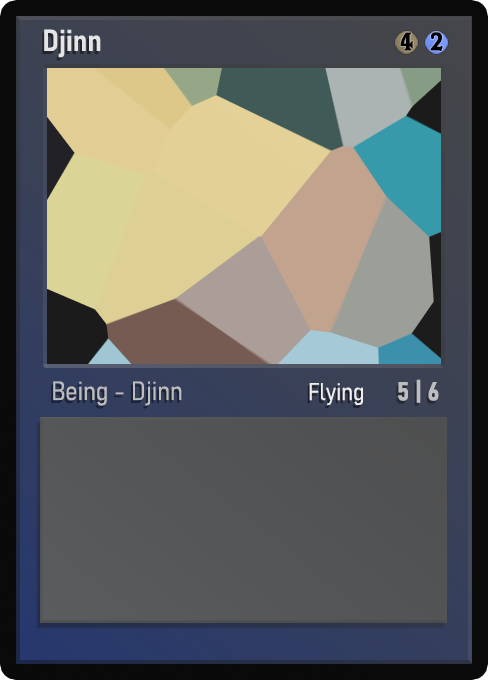
<style>
.page{position:relative;width:488px;height:680px}
.page>*{position:absolute;margin:0}
.t1{font:30px "Bahnschrift-SemiBoldSemiCondensed";color:#f2f2f2;font-weight:bold}
.t2{font:25px "WTRRoycroft";color:#000000;font-weight:bold;scale:1.09 1}
.t3{font:26px "Bahnschrift-LightSemiCondensed";color:#c8c8c8;font-weight:bold}
.t4{font:24px "Bahnschrift-LightSemiCondensed";color:#f0efef;font-weight:bold}
.t5{font:26px "Bahnschrift-BoldSemiCondensed";color:#bcbdc0;font-weight:bold}
</style>
<div class="page">
<p class="t1" style="left:44px;top:29px;width:57px;height:29px;opacity:0.9">Djinn</p>
<p class="t2" style="left:400px;top:32px;width:13px;height:19px">4</p>
<p class="t2" style="left:430px;top:32px;width:13px;height:19px">2</p>
<p class="t3" style="left:53px;top:381px;width:129px;height:25px;opacity:0.9">Being - Djinn</p>
<p class="t4" style="left:309px;top:383px;width:54px;height:23px">Flying</p>
<p class="t5" style="left:398px;top:379px;width:41px;height:24px">5 | 6</p>
</div>
